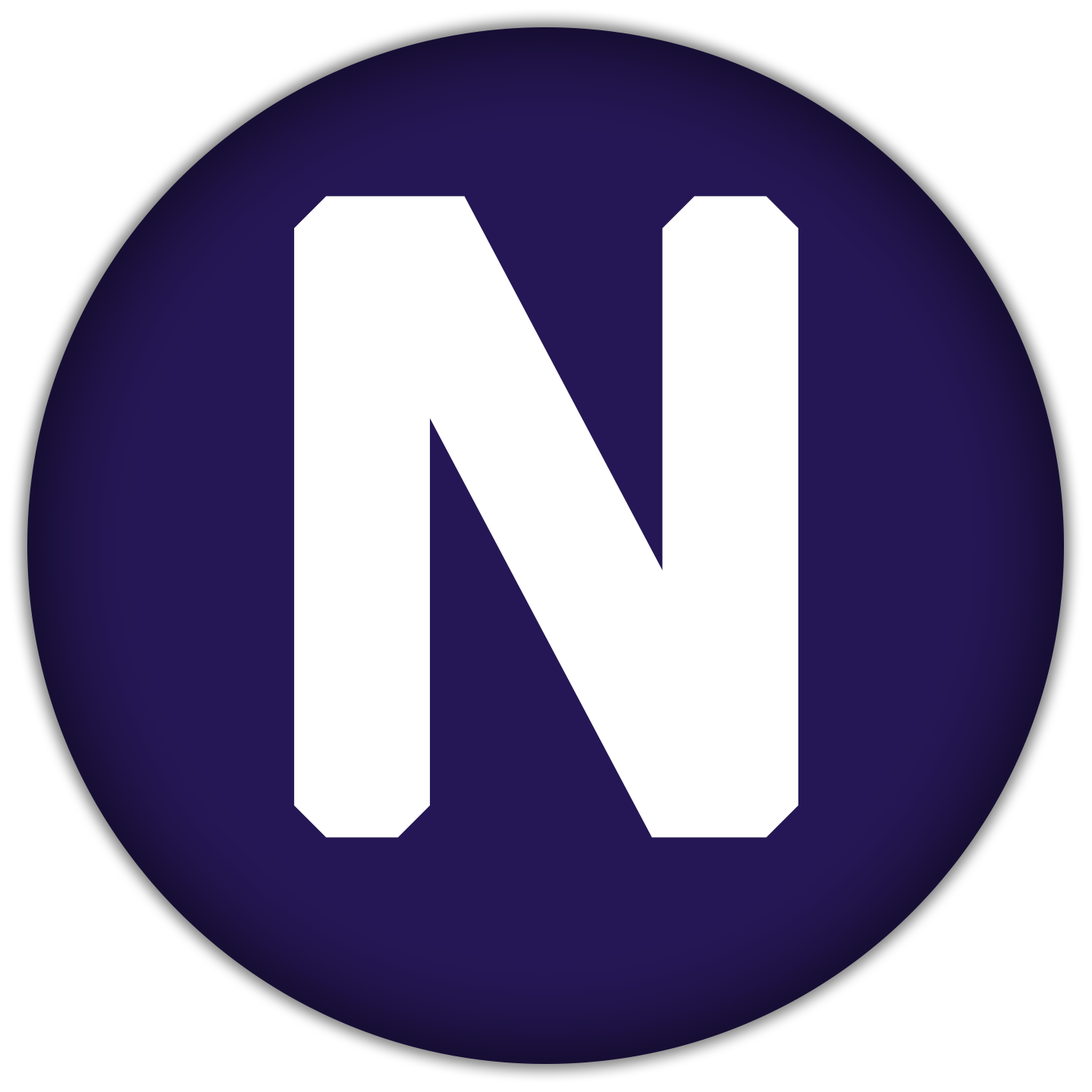
<style>
.page{position:relative;width:1092px;height:1092px;background:#ffffff}
.page>*{position:absolute;margin:0}
.t1{font:793.3px "Verdana";letter-spacing:0.05em;color:#ffffff;font-weight:bold}
</style>
<div class="page">
<p class="t1" style="left:293px;top:196px;width:506px;height:642px">N</p>
</div>
